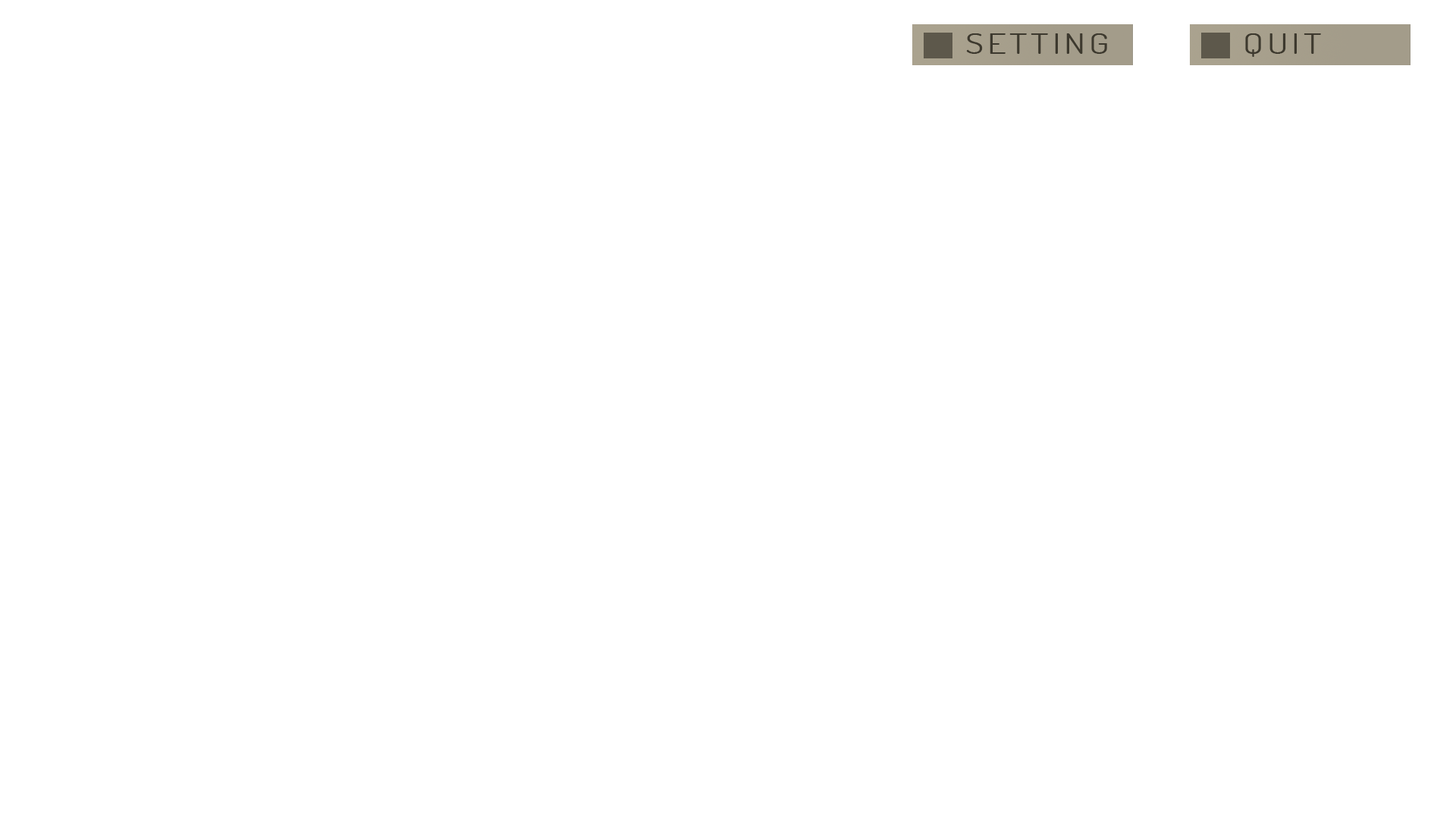
<style>
.page{position:relative;width:1456px;height:819px;background:#ffffff}
.page>*{position:absolute;margin:0}
.t1{font:27.3px "Dosis-Book";letter-spacing:0.1em;color:#3d392e;scale:1.35 1}
</style>
<div class="page">
<p class="t1" style="left:966px;top:33px;width:141px;height:21px">SETTING</p>
<p class="t1" style="left:1245px;top:33px;width:76px;height:24px">QUIT</p>
</div>
